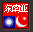
<style>
.page{position:relative;width:33px;height:32px;background:#333333}
.page>*{position:absolute;margin:0}
.t1{font:10.4px "SimSun";letter-spacing:-0.25em;color:#ffffff}
</style>
<div class="page">
<p class="t1" style="left:4px;top:4px;width:24px;height:9px">东南亚</p>
</div>
